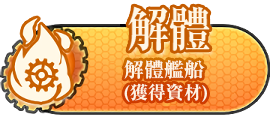
<style>
.page{position:relative;width:270px;height:117px;background:#ffffff}
.page>*{position:absolute;margin:0}
.t1{font:18px/24px "RyuminPr6N-ExBold";color:#fef4e3}
.t2{font:20px/24px "RyuminPr6N-ExBold";color:#fef4e3}
</style>
<div class="page">
<p class="t1" style="left:124px;top:60px;width:83px;height:42px"><span class="t2">解體艦船<br></span>(獲得資材)</p>
</div>
